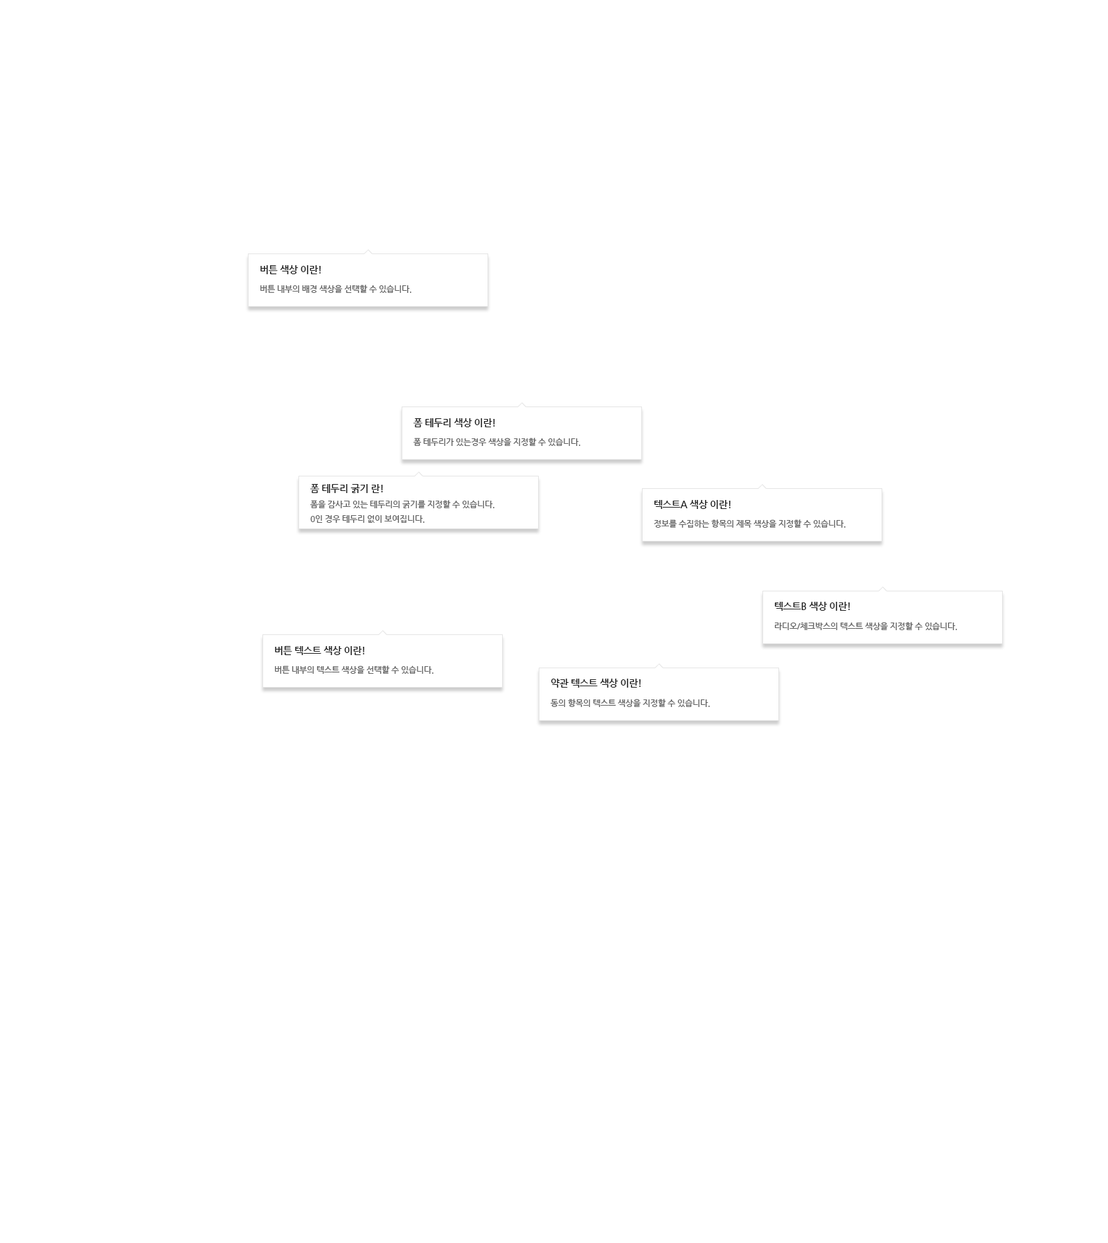
<style>
.page{position:relative;width:1108px;height:1243px;background:#ffffff}
.page>*{position:absolute;margin:0}
.t1{font:9.7px "NanumGothicBold";letter-spacing:-0.025em;color:#222222;text-transform:uppercase}
.t2{font:8.3px "NanumGothicBold";letter-spacing:-0.025em;color:#666666;text-transform:uppercase}
</style>
<div class="page">
<p class="t1" style="left:260px;top:264px;width:61px;height:11px">버튼 색상 이란!</p>
<p class="t2" style="left:260px;top:285px;width:151px;height:8px">버튼 내부의 배경 색상을 선택할 수 있습니다.</p>
<p class="t1" style="left:413px;top:417px;width:82px;height:11px">폼 테두리 색상 이란!</p>
<p class="t2" style="left:413px;top:438px;width:167px;height:8px">폼 테두리가 있는경우 색상을 지정할 수 있습니다.</p>
<p class="t1" style="left:310px;top:483px;width:73px;height:11px">폼 테두리 굵기 란!</p>
<p class="t2" style="left:310px;top:500px;width:184px;height:23px">폼을 감사고 있는 테두리의 굵기를 지정할 수 있습니다.<br>0인 경우 테두리 없이 보여집니다.</p>
<p class="t1" style="left:654px;top:500px;width:76px;height:9px">텍스트A 색상 이란!</p>
<p class="t2" style="left:654px;top:519px;width:191px;height:9px">정보를 수집하는 항목의 제목 색상을 지정할 수 있습니다.</p>
<p class="t1" style="left:774px;top:602px;width:75px;height:9px">텍스트B 색상 이란!</p>
<p class="t2" style="left:774px;top:622px;width:183px;height:8px">라디오/체크박스의 텍스트 색상을 지정할 수 있습니다.</p>
<p class="t1" style="left:275px;top:645px;width:89px;height:11px">버튼 텍스트 색상 이란!</p>
<p class="t2" style="left:275px;top:665px;width:158px;height:9px">버튼 내부의 텍스트 색상을 선택할 수 있습니다.</p>
<p class="t1" style="left:550px;top:678px;width:90px;height:9px">약관 텍스트 색상 이란!</p>
<p class="t2" style="left:550px;top:699px;width:160px;height:8px">동의 항목의 텍스트 색상을 지정할 수 있습니다.</p>
</div>
